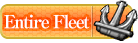
<style>
.page{position:relative;width:138px;height:43px;background:#ffffff}
.page>*{position:absolute;margin:0}
.t1{font:18px "RyuminPro-ExBold";letter-spacing:-0.08em;color:#ffffff}
</style>
<div class="page">
<p class="t1" style="left:4px;top:14px;width:86px;height:15px">Entire Fleet</p>
</div>
